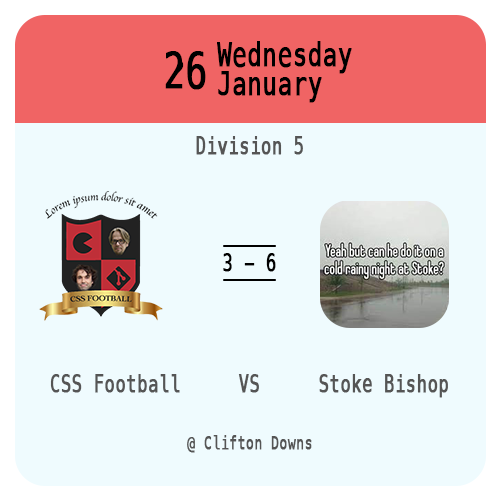
<style>
.page{position:relative;width:500px;height:500px;background:#effbfe}
.page>*{position:absolute;margin:0}
.t1{font:32.9px "Menlo-Regular";color:#000000;font-weight:bold;scale:0.73 1}
.t2{font:49.3px "Menlo-Regular";color:#000000;font-weight:bold;scale:0.73 1}
.t3{font:23.7px "Menlo-Regular";color:#555555;font-weight:bold;scale:0.73 1}
.t4{font:23.7px "Menlo-Regular";color:#000000;font-weight:bold;scale:0.73 1}
.t5{font:23.8px "Menlo-Regular";color:#555555;font-weight:bold;scale:0.73 1}
.t6{font:18.3px "Menlo-Regular";color:#555555;font-weight:bold;scale:0.73 1}
</style>
<div class="page">
<p class="t1" style="left:217px;top:41px;width:135px;height:62px">Wednesday<br>January</p>
<p class="t2" style="left:165px;top:51px;width:41px;height:39px">26</p>
<p class="t3" style="left:196px;top:136px;width:107px;height:19px">Division 5</p>
<p class="t4" style="left:223px;top:253px;width:53px;height:19px">3 - 6</p>
<p class="t5" style="left:50px;top:374px;width:130px;height:19px">CSS Football</p>
<p class="t5" style="left:238px;top:374px;width:21px;height:19px">VS</p>
<p class="t5" style="left:319px;top:374px;width:129px;height:24px">Stoke Bishop</p>
<p class="t6" style="left:187px;top:435px;width:125px;height:18px">@ Clifton Downs</p>
</div>
